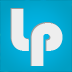
<style>
.page{position:relative;width:72px;height:72px;background:#eeeeee}
.page>*{position:absolute;margin:0}
.t1{font:65px "Bauhaus93";letter-spacing:-0.025em;color:#ffffff}
</style>
<div class="page">
<p class="t1" style="left:10px;top:8px;width:53px;height:58px">LP</p>
</div>
